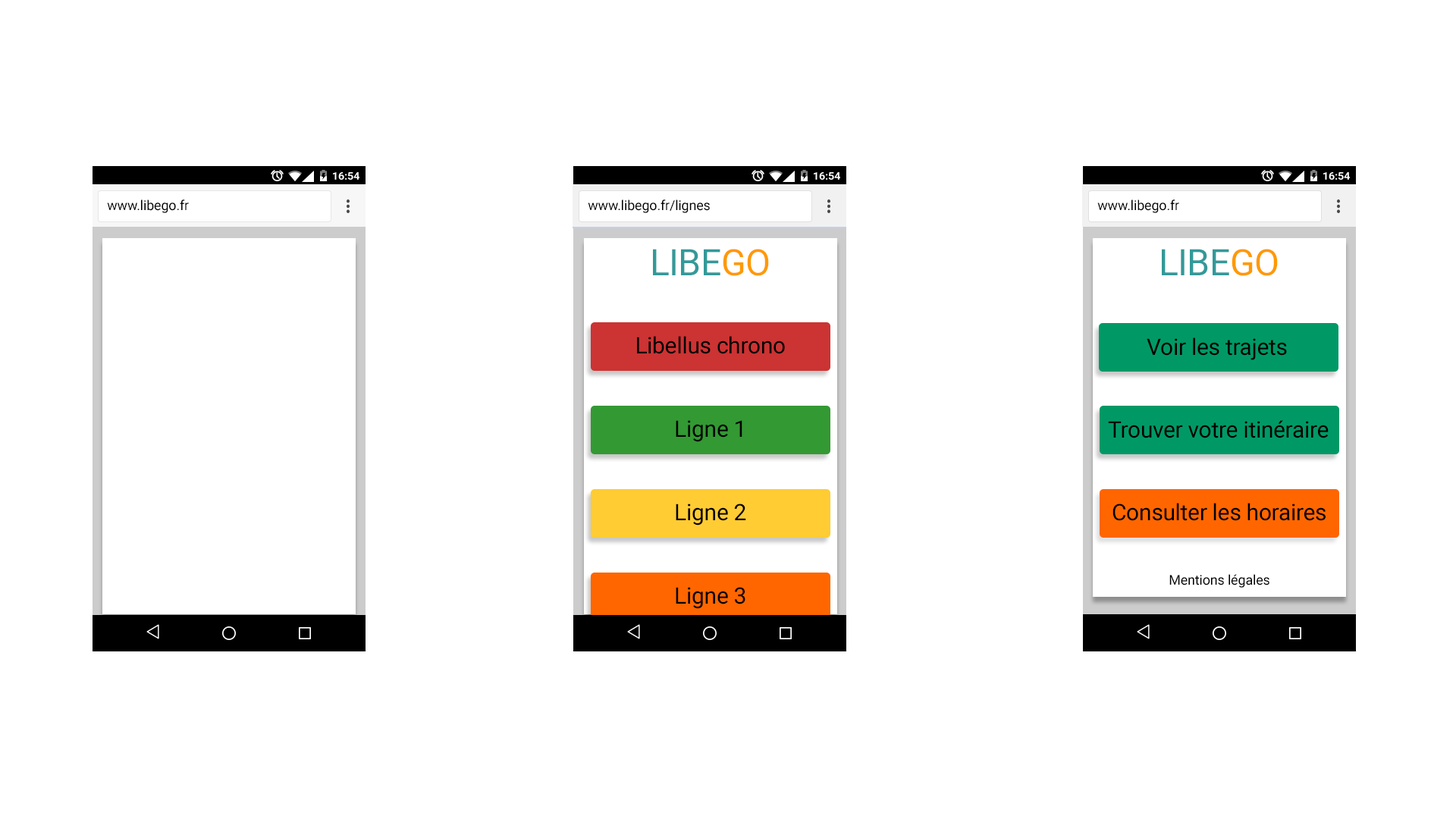
<style>
.page{position:relative;width:1456px;height:819px;background:#ffffff}
.page>*{position:absolute;margin:0}
.t1{font:13.7px "Roboto-Regular";letter-spacing:-0.01em;color:#000000}
.t2{font:36.4px "Roboto-Regular";letter-spacing:-0.01em;color:#339999}
.t3{font:36.4px "Roboto-Regular";letter-spacing:-0.01em;color:#ff9900}
.t4{font:22.7px "Roboto-Regular";letter-spacing:-0.01em;color:#000000}
.t5{font:13.6px "Roboto-Regular";letter-spacing:-0.01em;color:#000000}
</style>
<div class="page">
<p class="t1" style="left:107px;top:199px;width:82px;height:14px">www.libego.fr</p>
<p class="t1" style="left:588px;top:199px;width:122px;height:14px">www.libego.fr/lignes</p>
<p class="t1" style="left:1097px;top:199px;width:82px;height:14px">www.libego.fr</p>
<p class="t2" style="left:653px;top:249px;width:116px;height:27px">LIBE<span class="t3">GO</span></p>
<p class="t2" style="left:1162px;top:249px;width:116px;height:27px">LIBE<span class="t3">GO</span></p>
<p class="t4" style="left:637px;top:336px;width:148px;height:18px">Libellus chrono</p>
<p class="t4" style="left:1147px;top:337px;width:140px;height:23px">Voir les trajets</p>
<p class="t4" style="left:676px;top:420px;width:66px;height:22px">Ligne 1</p>
<p class="t4" style="left:1108px;top:420px;width:221px;height:18px">Trouver votre itinéraire</p>
<p class="t4" style="left:676px;top:504px;width:70px;height:22px">Ligne 2</p>
<p class="t4" style="left:1112px;top:503px;width:214px;height:18px">Consulter les horaires</p>
<p class="t5" style="left:1169px;top:574px;width:100px;height:14px">Mentions légales</p>
<p class="t4" style="left:676px;top:587px;width:69px;height:22px">Ligne 3</p>
</div>
